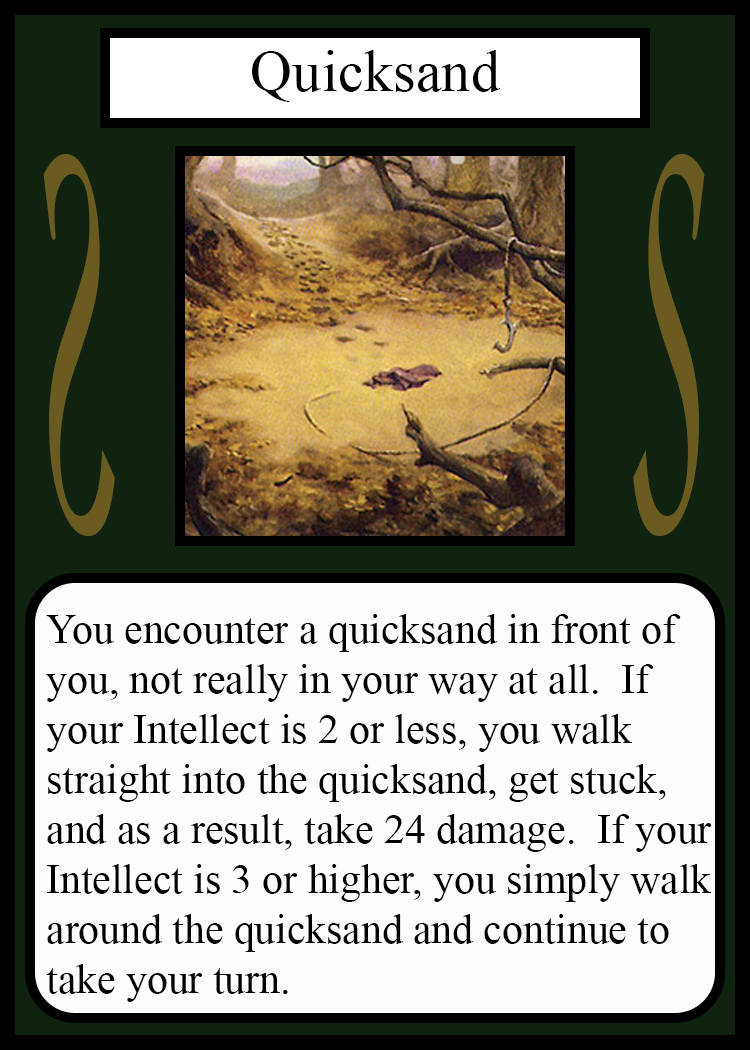
<style>
.page{position:relative;width:750px;height:1050px;background:#fffcfc}
.page>*{position:absolute;margin:0}
.t1{font:58.3px "TimesNewRomanPSMT";color:#010101}
.t2{font:548.5px "Apple-Chancery";color:#6a5c21;scale:0.27 1}
.t3{font:548.2px "Apple-Chancery";color:#6a5c21;scale:0.27 1}
.t4{font:41.7px "TimesNewRomanPSMT";color:#000000}
</style>
<div class="page">
<p class="t1" style="left:252px;top:50px;width:249px;height:52px">Quicksand</p>
<p class="t2" style="left:43px;top:154px;width:72px;height:382px;rotate:180deg">S</p>
<p class="t3" style="left:633px;top:154px;width:72px;height:382px">S</p>
<p class="t4" style="left:46px;top:614px;width:666px;height:388px">You encounter a quicksand in front of<br>you, not really in your way at all.  If <br>your Intellect is 2 or less, you walk<br>straight into the quicksand, get stuck,<br>and as a result, take 24 damage.  If your <br>Intellect is 3 or higher, you simply walk<br>around the quicksand and continue to <br>take your turn.</p>
</div>
